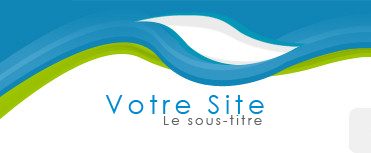
<style>
.page{position:relative;width:371px;height:153px;background:#ffffff}
.page>*{position:absolute;margin:0}
.t1{font:25.6px "CenturyGothic";letter-spacing:0.18em;color:#008ad1}
.t2{font:12.8px "CenturyGothic";letter-spacing:0.18em;color:#636363}
</style>
<div class="page">
<p class="t1" style="left:105px;top:95px;width:159px;height:19px">Votre Site</p>
<p class="t2" style="left:164px;top:115px;width:98px;height:10px">Le sous-titre</p>
</div>
